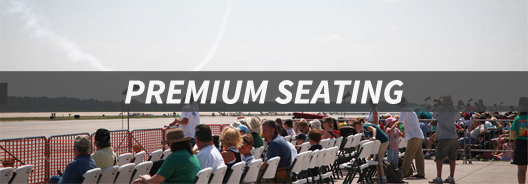
<style>
.page{position:relative;width:528px;height:184px}
.page>*{position:absolute;margin:0}
.t1{font:34.9px "SourceSansPro-BoldIt";color:#ffffff;text-transform:uppercase}
</style>
<div class="page">
<p class="t1" style="left:125px;top:80px;width:279px;height:24px;opacity:0.95">PREMIUM SEATING</p>
</div>
